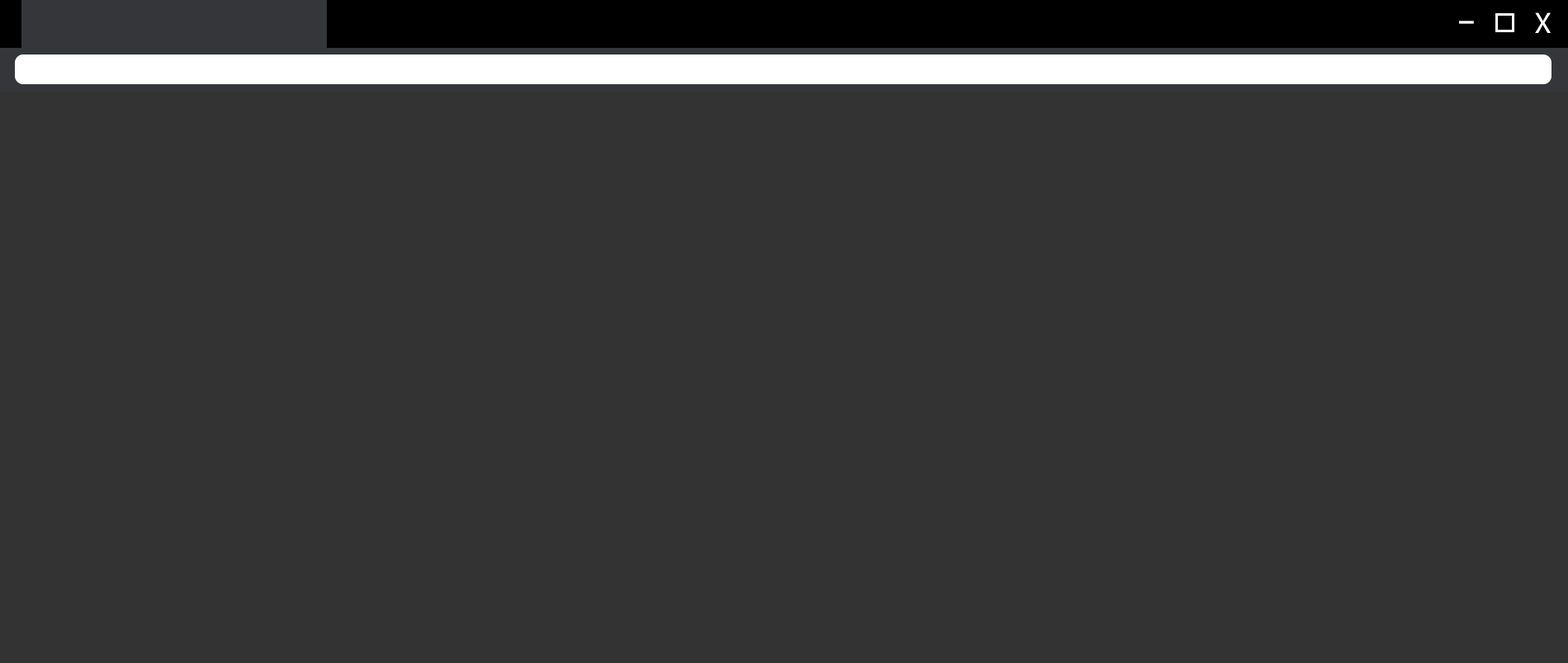
<style>
.page{position:relative;width:1568px;height:663px;background:#333333}
.page>*{position:absolute;margin:0}
.t1{font:29.7px "MyriadHebrew-Regular";color:#ffffff;text-transform:uppercase}
.t2{font:29.7px "MyriadHebrew-Regular";color:#ffffff;text-transform:uppercase;scale:2 1}
</style>
<div class="page">
<p class="t1" style="left:1535px;top:12px;width:16px;height:21px">x</p>
<p class="t2" style="left:1459px;top:21px;width:15px;height:3px">-</p>
</div>
